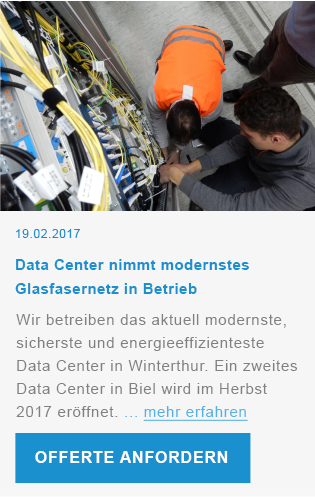
<style>
.page{position:relative;width:315px;height:497px;background:#f6f6f6}
.page>*{position:absolute;margin:0}
.t1{font:12px "ArialMT";letter-spacing:0.05em;color:#1b90cf}
.t2{font:15px/24px "Arial-BoldMT";letter-spacing:0.03em;color:#1b90cf}
.t3{font:15px/23px "ArialMT";letter-spacing:0.05em;color:#80807f}
.t4{font:15px/23px "ArialMT";letter-spacing:0.05em;color:#80807f;text-decoration:underline}
.t5{font:16px "Arial-BoldMT";letter-spacing:0.05em;color:#ffffff}
</style>
<div class="page">
<p class="t1" style="left:16px;top:229px;width:64px;height:9px">19.02.2017</p>
<p class="t2" style="left:15px;top:259px;width:234px;height:35px">Data Center nimmt modernstes <br>Glasfasernetz in Betrieb</p>
<p class="t3" style="left:16px;top:314px;width:282px;height:107px">Wir betreiben das aktuell modernste, sicherste und energieeffizienteste Data Center in Winterthur. Ein zweites Data Center in Biel wird im Herbst 2017 eröffnet. ... <span class="t4">mehr erfahren</span></p>
<p class="t5" style="left:35px;top:451px;width:193px;height:12px">OFFERTE ANFORDERN</p>
</div>
